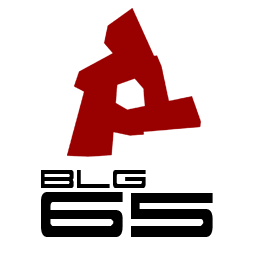
<style>
.page{position:relative;width:256px;height:256px;background:#ffffff}
.page>*{position:absolute;margin:0}
.t1{font:36.7px "911Porscha";color:#000000}
.t2{font:91.7px/48.9px "911Porscha";color:#000000}
</style>
<div class="page">
<p class="t1" style="left:41px;top:170px;width:172px;height:67px">BLG<br><span class="t2">65</span></p>
</div>
